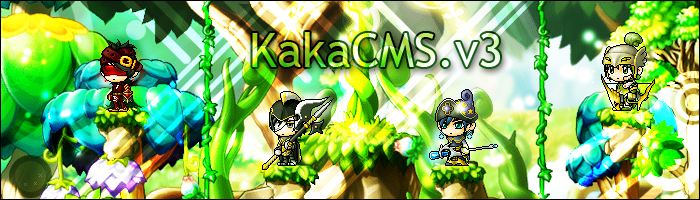
<style>
.page{position:relative;width:700px;height:200px}
.page>*{position:absolute;margin:0}
.t1{font:48px "TrebuchetMS"}
</style>
<div class="page">
<p class="t1" style="left:252px;top:32px;width:248px;height:35px">KakaCMS.v3</p>
</div>
